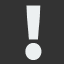
<style>
.page{position:relative;width:64px;height:64px;background:#333333}
.page>*{position:absolute;margin:0}
.t1{font:80px "SourceSansPro-Black";color:#ecf0f1}
</style>
<div class="page">
<p class="t1" style="left:25px;top:5px;width:17px;height:55px">!</p>
</div>
